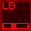
<style>
.page{position:relative;width:31px;height:31px;background:#320000}
.page>*{position:absolute;margin:0}
.t1{font:10px "rktr7rg";color:#ff0000}
</style>
<div class="page">
<p class="t1" style="left:2px;top:2px;width:13px;height:7px">LB</p>
</div>
